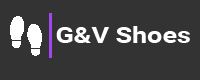
<style>
.page{position:relative;width:200px;height:80px;background:#333333}
.page>*{position:absolute;margin:0}
.t1{font:22.3px "Roboto-Bold";color:#ffffff;scale:1.21 1}
</style>
<div class="page">
<p class="t1" style="left:56px;top:26px;width:134px;height:17px">G&amp;V Shoes</p>
</div>
